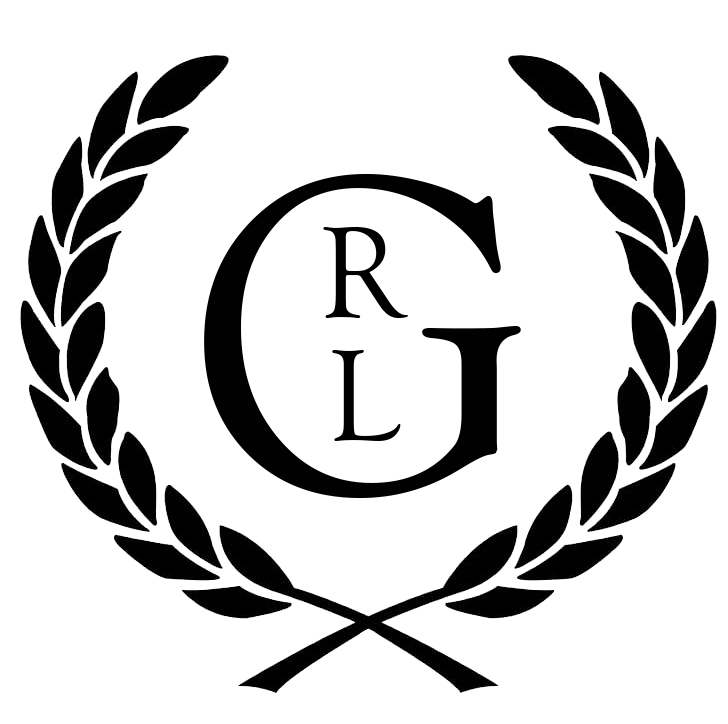
<style>
.page{position:relative;width:728px;height:724px;background:#ffffff}
.page>*{position:absolute;margin:0}
.t1{font:466.7px "GoudyOldStyleT-Regular";color:#010101}
.t2{font:133.3px "GoudyOldStyleT-Regular";color:#000000}
</style>
<div class="page">
<p class="t1" style="left:204px;top:174px;width:317px;height:324px">G</p>
<p class="t2" style="left:323px;top:227px;width:85px;height:91px">R</p>
<p class="t2" style="left:332px;top:350px;width:69px;height:91px">L</p>
</div>
